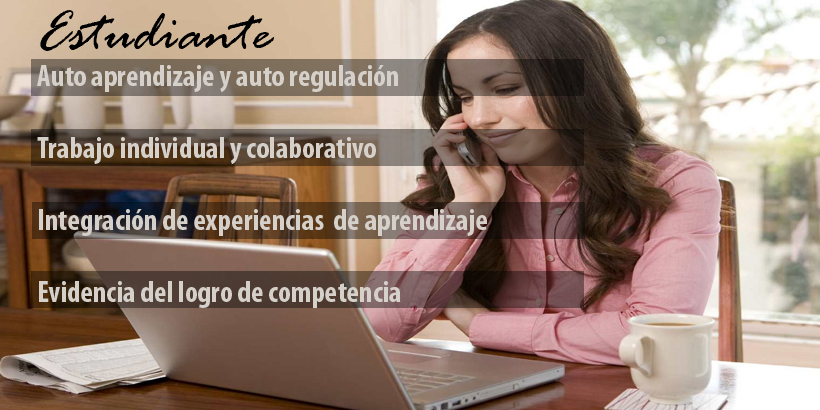
<style>
.page{position:relative;width:820px;height:410px}
.page>*{position:absolute;margin:0}
.t1{font:60px "RageItalic";color:#000000}
.t2{font:30px "MyriadPro-BoldCond";color:#d5d0ca}
</style>
<div class="page">
<p class="t1" style="left:40px;top:10px;width:234px;height:41px">Estudiante</p>
<p class="t2" style="left:37px;top:65px;width:450px;height:243px">Auto aprendizaje y auto regulación<br><br>Trabajo individual y colaborativo<br><br>Integración de experiencias  de aprendizaje<br><br>Evidencia del logro de competencia</p>
</div>
